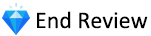
<style>
.page{position:relative;width:151px;height:36px;background:#ffffff}
.page>*{position:absolute;margin:0}
.t1{font:24px "Calibri";color:#000000}
</style>
<div class="page">
<p class="t1" style="left:37px;top:11px;width:111px;height:18px">End Review</p>
</div>
